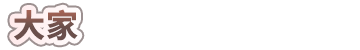
<style>
.page{position:relative;width:360px;height:50px;background:#ffffff}
.page>*{position:absolute;margin:0}
.t1{font:32px "SourceHanSansSC-Bold";color:#73534d;font-weight:bold}
</style>
<div class="page">
<p class="t1" style="left:14px;top:9px;width:64px;height:32px">大家</p>
</div>
